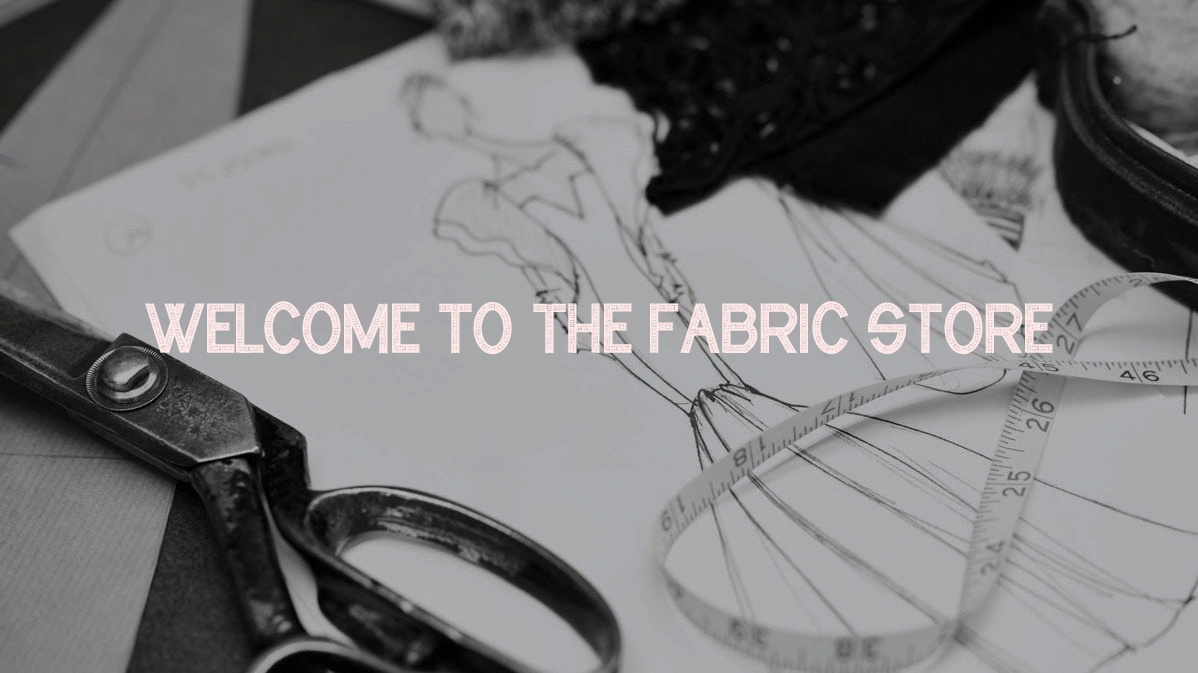
<style>
.page{position:relative;width:1198px;height:673px}
.page>*{position:absolute;margin:0}
.t1{font:60px "CFIndustrialFabrics-Regular";color:#ffeaea}
</style>
<div class="page">
<p class="t1" style="left:145px;top:301px;width:908px;height:54px">Welcome to The Fabric Store</p>
</div>
